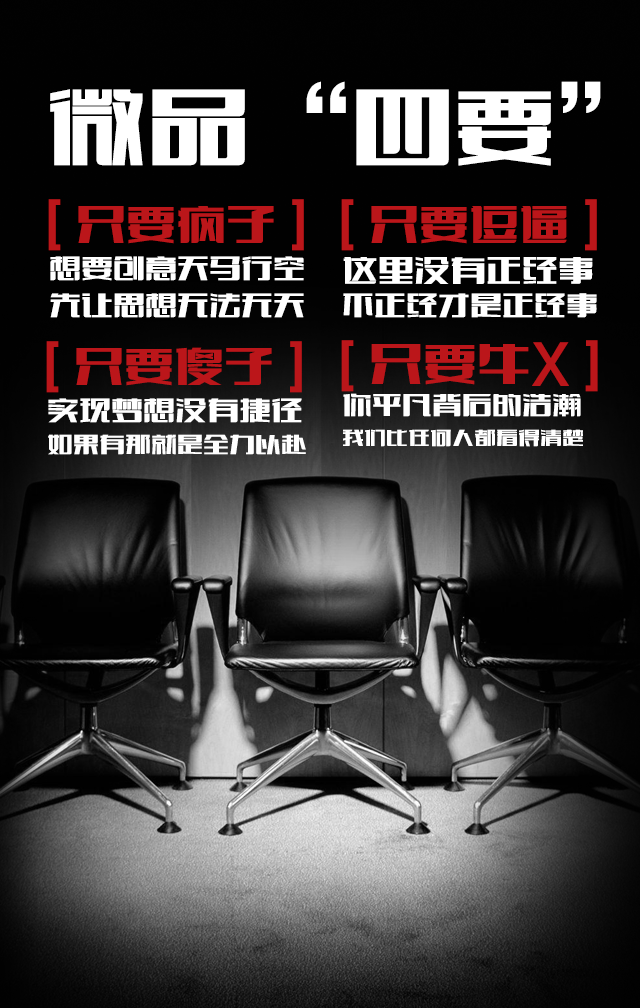
<style>
.page{position:relative;width:640px;height:1008px;background:#010101}
.page>*{position:absolute;margin:0}
.t1{font:102px "FZCTHJW--GB1-0";color:#ffffff}
.t2{font:50px/53px "FZCTHJW--GB1-0";color:#bb161a}
.t3{font:32px/37px "FZCTHJW--GB1-0";color:#ffffff}
.t4{font:32px/44px "FZCTHJW--GB1-0";color:#ffffff}
.t5{font:36px/37px "FZCTHJW--GB1-0";color:#ffffff}
.t6{font:26px/44px "FZCTHJW--GB1-0";color:#ffffff}
.t7{font:22px/44px "FZCTHJW--GB1-0";color:#ffffff}
.t8{font:54px/53px "FZCTHJW--GB1-0";color:#bb161a}
.t9{font:30px/37px "FZCTHJW--GB1-0";color:#ffffff}
</style>
<div class="page">
<p class="t1" style="left:50px;top:81px;width:551px;height:85px">微品“四要”</p>
<p class="t2" style="left:48px;top:199px;width:256px;height:119px">[ 只要疯子 ]<br><span class="t3">想要创意天马行空<br></span><span class="t4">先让思想无法无天</span></p>
<p class="t2" style="left:341px;top:199px;width:256px;height:119px">[ 只要逗逼 ]<br><span class="t5">这里没有正经事<br></span><span class="t4">不正经才是正经事</span></p>
<p class="t6" style="left:46px;top:341px;width:260px;height:114px"><span class="t2">[ 只要傻子 ]<br></span><span class="t3">实现梦想没有捷径<br></span>如果有那就是全力以赴</p>
<p class="t7" style="left:341px;top:340px;width:257px;height:107px"><span class="t2">[ </span><span class="t8">只要牛X</span><span class="t2"> ]<br></span><span class="t9">你平凡背后的浩瀚<br></span>我们比任何人都看得清楚</p>
</div>
